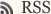
<style>
.page{position:relative;width:51px;height:14px;background:#fdfaf2}
.page>*{position:absolute;margin:0}
.t1{font:17.3px "Georgia";color:#333333;scale:0.94 1}
</style>
<div class="page">
<p class="t1" style="left:21px;top:0px;width:29px;height:14px">RSS</p>
</div>
